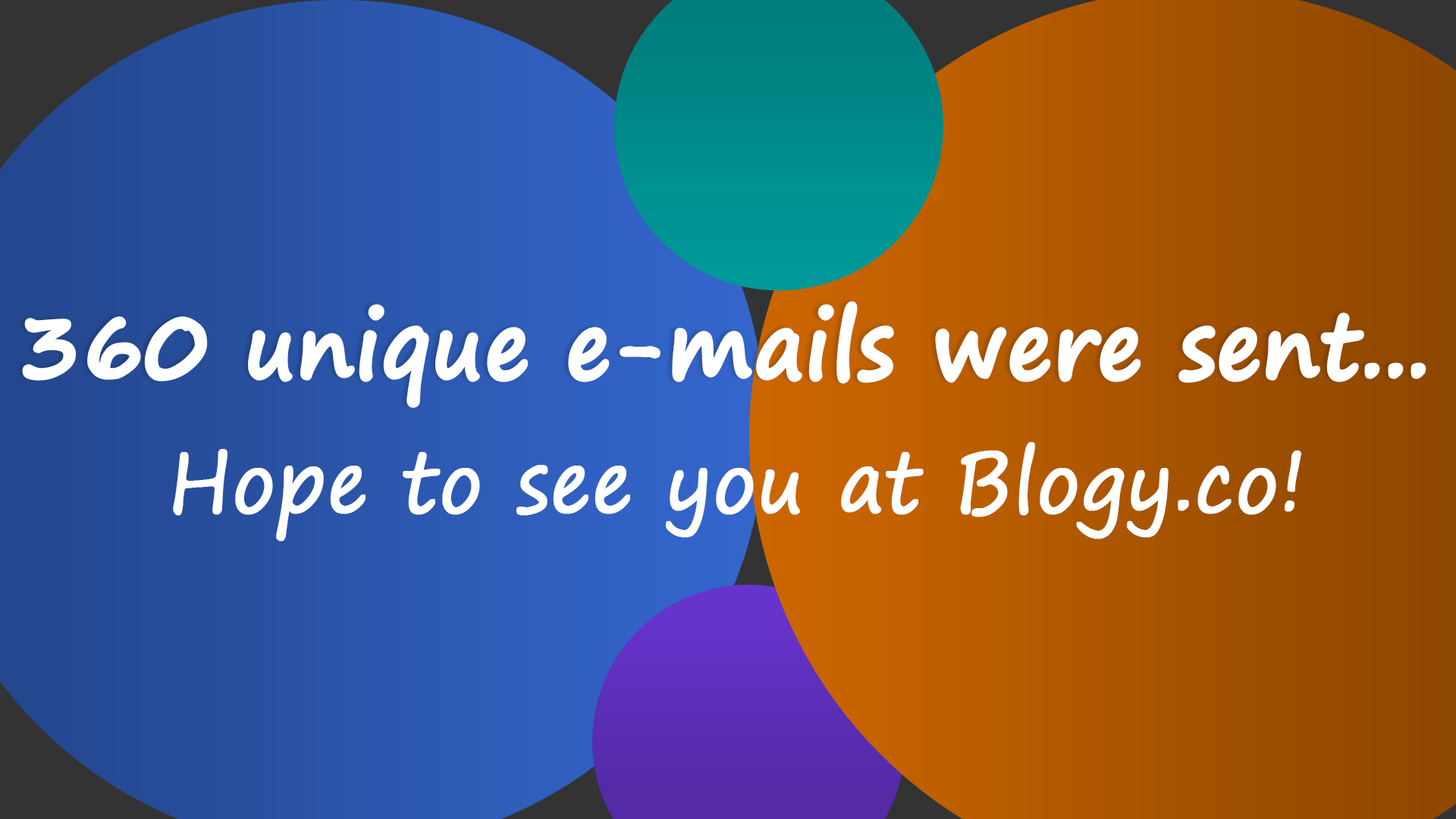
<style>
.page{position:relative;width:1456px;height:819px}
.page>*{position:absolute;margin:0}
.t1{font:91.8px "SegoePrint-Bold";color:#ffffff;font-weight:bold;scale:0.91 1}
.t2{font:83.4px "SegoePrint";color:#ffffff;font-weight:bold;scale:0.91 1}
</style>
<div class="page">
<p class="t1" style="left:22px;top:301px;width:1404px;height:107px">360 unique e-mails were sent...</p>
<p class="t2" style="left:173px;top:442px;width:1128px;height:99px">Hope to see you at Blogy.co!</p>
</div>
